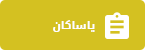
<style>
.page{position:relative;width:145px;height:50px;background:#d4c121}
.page>*{position:absolute;margin:0}
.t1{font:11px "DroidArabicKufi-Bold";color:#ffffff}
</style>
<div class="page">
<p class="t1" style="left:53px;top:20px;width:42px;height:12px">یاساکان</p>
</div>
